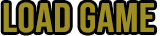
<style>
.page{position:relative;width:160px;height:36px;background:#9f8f20}
.page>*{position:absolute;margin:0}
.t1{font:41.4px "BebasNeue-Regular";letter-spacing:0.01em;color:#9f8f20;scale:1.06 1}
</style>
<div class="page">
<p class="t1" style="left:3px;top:2px;width:151px;height:31px">Load Game</p>
</div>
